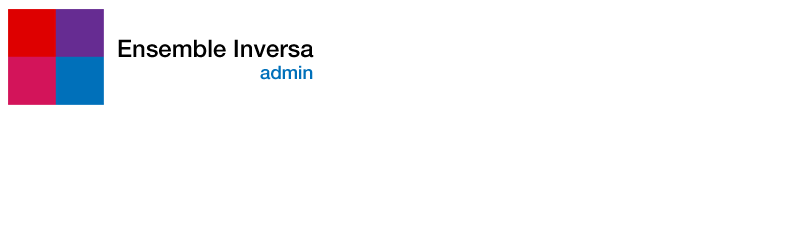
<style>
.page{position:relative;width:800px;height:240px;background:#ffffff}
.page>*{position:absolute;margin:0}
.t1{font:24px "HelveticaNeueLTPro-Md";color:#000000}
.t2{font:18.7px "HelveticaNeueLTPro-Md";color:#0070ba}
</style>
<div class="page">
<p class="t1" style="left:118px;top:39px;width:196px;height:19px">Ensemble Inversa</p>
<p class="t2" style="left:260px;top:65px;width:53px;height:15px">admin</p>
</div>
